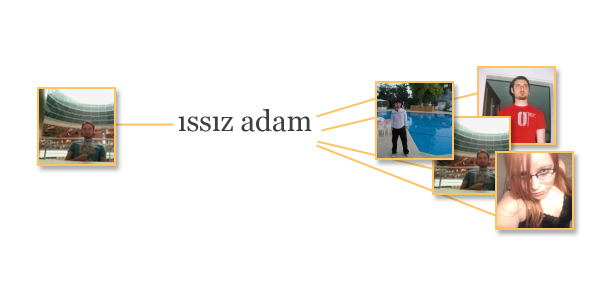
<style>
.page{position:relative;width:600px;height:300px;background:#ffffff}
.page>*{position:absolute;margin:0}
.t1{font:29.2px "Georgia";color:#404040}
</style>
<div class="page">
<p class="t1" style="left:178px;top:109px;width:134px;height:23px">ıssız adam</p>
</div>
